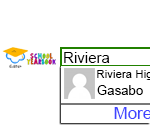
<style>
.page{position:relative;width:150px;height:130px;background:#ffffff}
.page>*{position:absolute;margin:0}
.t1{font:15.1px "ArialMT";color:#000000}
.t2{font:13.2px "ArialMT";color:#000000}
.t3{font:16.9px "ArialMT";color:#3f44ff}
</style>
<div class="page">
<p class="t1" style="left:64px;top:52px;width:46px;height:11px">Riviera</p>
<p class="t2" style="left:97px;top:85px;width:46px;height:10px">Gasabo</p>
<p class="t3" style="left:114px;top:107px;width:38px;height:12px">More</p>
</div>
